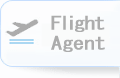
<style>
.page{position:relative;width:120px;height:78px;background:#fdfdfe}
.page>*{position:absolute;margin:0}
.t1{font:18px/20px "MS-Gothic";letter-spacing:-0.05em;color:#acacac;font-weight:bold;scale:1.19 1}
.t2{font:18px/20px "MS-Gothic";letter-spacing:-0.005em;color:#acacac;font-weight:bold;scale:1.19 1}
</style>
<div class="page">
<p class="t1" style="left:51px;top:15px;width:54px;height:37px;text-align:center">Flight<br><span class="t2">Agent</span></p>
</div>
